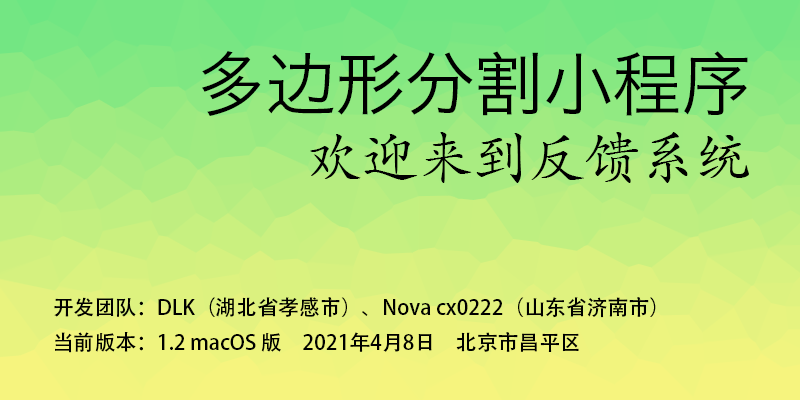
<style>
.page{position:relative;width:800px;height:400px}
.page>*{position:absolute;margin:0}
.t1{font:69.4px "HiraginoSansGB-W3";color:#000000}
.t2{font:55.6px "SIL-Kai-Reg-Jian";color:#000000}
.t3{font:20.8px/34.7px "AdobeHeitiStd-Regular";color:#000000}
</style>
<div class="page">
<p class="t1" style="left:202px;top:51px;width:547px;height:132px;text-align:right">多边形分割小程序<br><span class="t2">欢迎来到反馈系统</span></p>
<p class="t3" style="left:54px;top:297px;width:602px;height:56px">开发团队：DLK（湖北省孝感市）、Nova cx0222（山东省济南市）<br>当前版本：1.2 macOS 版 2021年4月8日 北京市昌平区</p>
</div>
